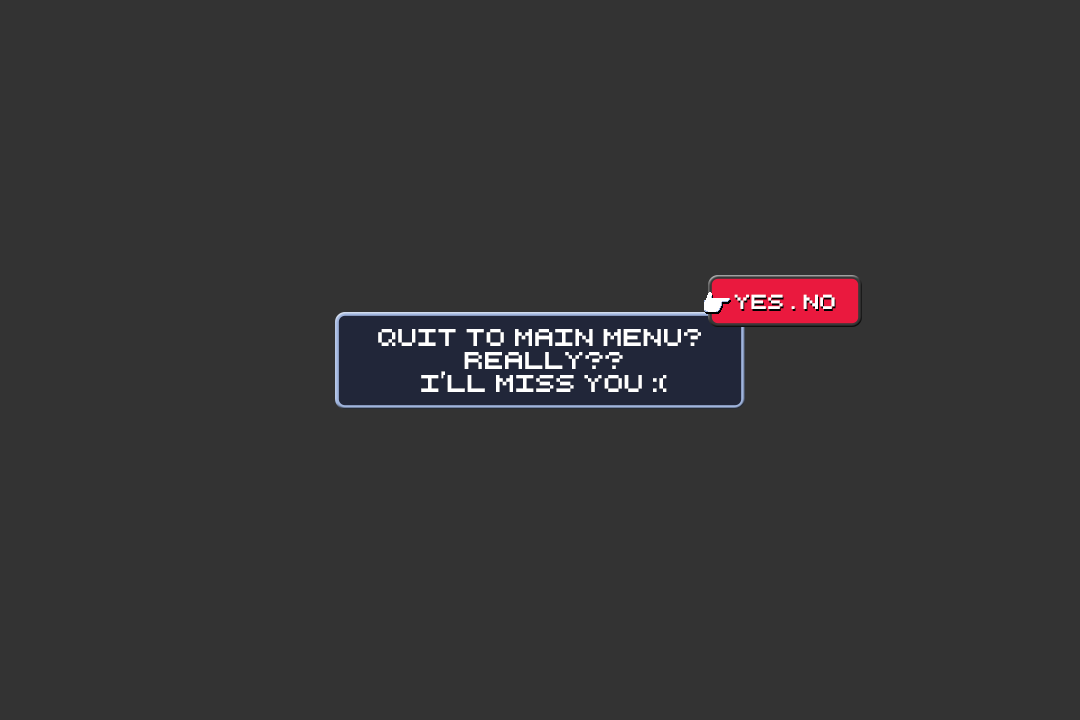
<style>
.page{position:relative;width:1080px;height:720px;background:#333333}
.page>*{position:absolute;margin:0}
.t1{font:19.8px "RetroComputer";color:#ffffff}
.t2{font:23.8px/22.5px "RetroComputer";color:#ffffff}
</style>
<div class="page">
<p class="t1" style="left:734px;top:294px;width:101px;height:15px">yes . no</p>
<p class="t2" style="left:378px;top:329px;width:323px;height:63px;text-align:center">Quit to main menu? <br>Really??<br>i'll miss you :(</p>
</div>
